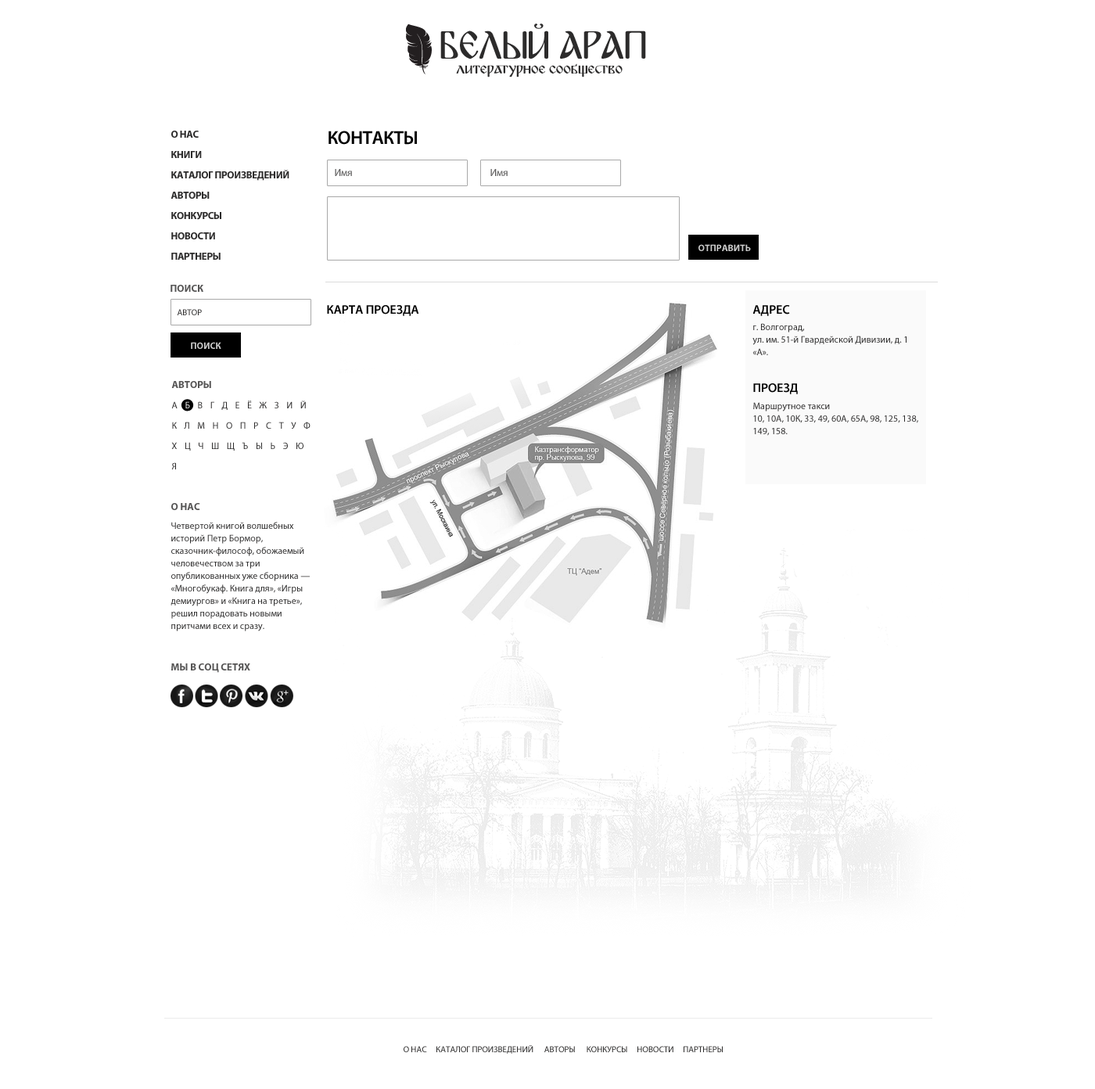
<style>
.page{position:relative;width:1095px;height:1089px;background:#ffffff}
.page>*{position:absolute;margin:0}
.t1{font:40.3px "BulgariaModernaV3";color:#2c2b2b;text-transform:uppercase}
.t2{font:17.2px "BulgariaModernaV3";color:#2c2b2b}
.t3{font:10.2px/20.3px "MyriadPro-Bold";letter-spacing:-0.025em;color:#2c2b2b;text-transform:uppercase}
.t4{font:18.8px "MyriadPro-Semibold";letter-spacing:-0.025em;color:#000000;text-transform:uppercase}
.t5{font:10.2px "MyriadPro-Regular";color:#565555}
.t6{font:9.4px "MyriadPro-Bold";color:#cccccc;text-transform:uppercase}
.t7{font:10.2px "MyriadPro-Bold";color:#565555;text-transform:uppercase}
.t8{font:12.5px "MyriadPro-Semibold";color:#000000;text-transform:uppercase}
.t9{font:8.6px "MyriadPro-Regular";color:#2c2b2b;text-transform:uppercase}
.t10{font:9.4px/12.5px "MyriadPro-Regular";color:#2c2b2b}
.t11{font:9.4px/20.3px "MyriadPro-Regular";letter-spacing:0.8em;color:#2c2b2b;text-transform:uppercase}
.t12{font:9.4px/20.3px "MyriadPro-Regular";letter-spacing:0.8em;color:#ffffff;text-transform:uppercase}
</style>
<div class="page">
<p class="t1" style="left:440px;top:23px;width:206px;height:36px">Белый Арап</p>
<p class="t2" style="left:456px;top:63px;width:167px;height:14px">литературное сообщество</p>
<p class="t3" style="left:171px;top:131px;width:118px;height:129px">о нас<br>книги<br>каталог произведений<br>авторы<br>конкурсы<br>новости <br>партнеры</p>
<p class="t4" style="left:329px;top:131px;width:88px;height:14px">контакты</p>
<p class="t5" style="left:335px;top:169px;width:17px;height:7px">Имя</p>
<p class="t5" style="left:490px;top:169px;width:18px;height:7px">Имя</p>
<p class="t6" style="left:699px;top:244px;width:52px;height:7px">отправить</p>
<p class="t7" style="left:171px;top:285px;width:32px;height:7px">поиск</p>
<p class="t8" style="left:327px;top:305px;width:92px;height:11px">карта проезда</p>
<p class="t8" style="left:753px;top:305px;width:37px;height:11px">АДРЕС</p>
<p class="t9" style="left:177px;top:309px;width:25px;height:6px">автор</p>
<p class="t10" style="left:753px;top:323px;width:154px;height:32px">г. Волгоград,<br>ул. им. 51-й Гвардейской Дивизии, д. 1 «А».</p>
<p class="t6" style="left:191px;top:342px;width:30px;height:7px">поиск</p>
<p class="t7" style="left:171px;top:381px;width:40px;height:7px">авторы</p>
<p class="t8" style="left:753px;top:383px;width:45px;height:11px">ПРОЕЗД</p>
<p class="t11" style="left:171px;top:401px;width:140px;height:68px">А<span class="t12">Б</span>ВГДЕЁЖЗИЙКЛМНОПРСТУФХЦЧШЩЪЫЬЭЮЯ</p>
<p class="t10" style="left:753px;top:402px;width:165px;height:34px">Маршрутное такси <br>10, 10А, 10К, 33, 49, 60А, 65А, 98, 125, 138, 149, 158.</p>
<p class="t7" style="left:171px;top:503px;width:29px;height:7px">о нас</p>
<p class="t10" style="left:171px;top:522px;width:139px;height:109px">Четвертой книгой волшебных историй Петр Бормор, сказочник-философ, обожаемый человечеством за три опубликованных уже сборника — «Многобукаф. Книга для», «Игры демиургов» и «Книга на третье», решил порадовать новыми притчами всех и сразу.<br>«Запасная книжка» — это сказки с изрядной долей светлого юмора и мудрости для читателя любого роста.</p>
<p class="t7" style="left:171px;top:663px;width:79px;height:10px">мы в соц сетях</p>
<p class="t9" style="left:404px;top:1045px;width:319px;height:9px">о нас     каталог произведений      авторы      конкурсы     новости     партнеры</p>
</div>
